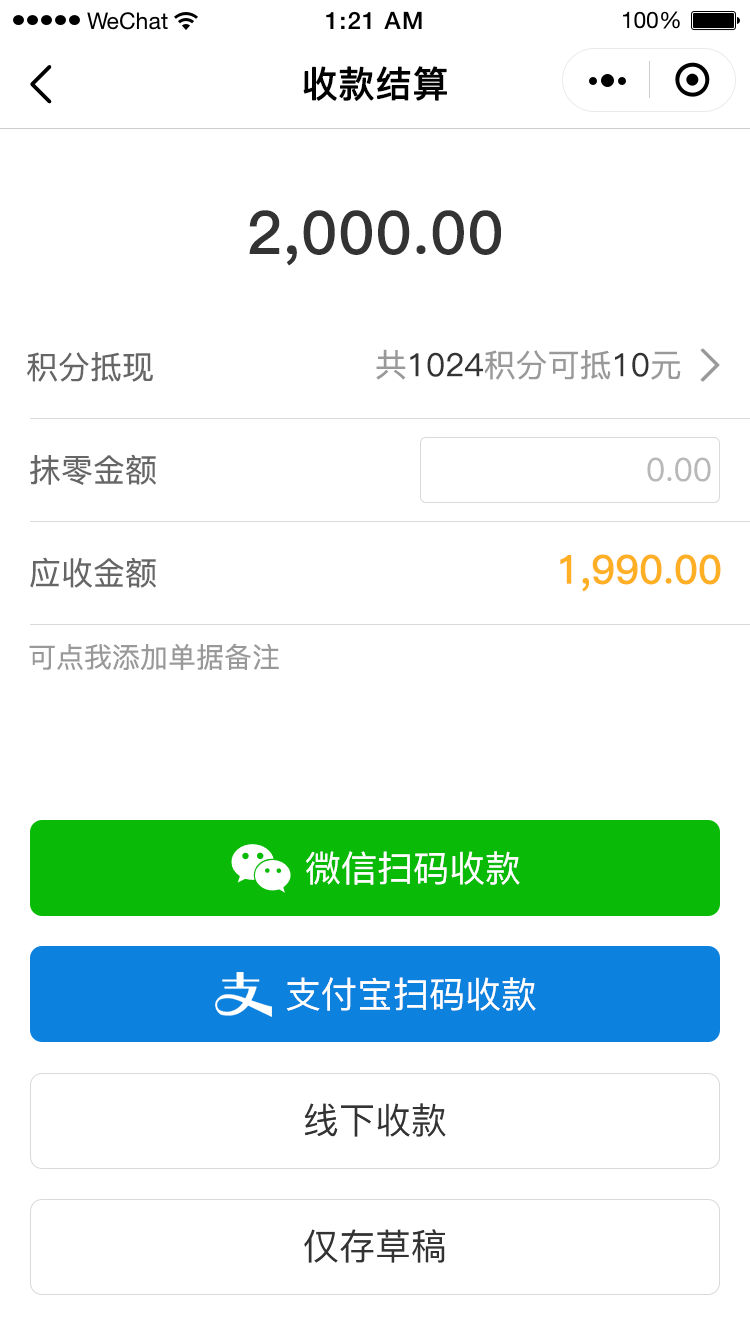
<style>
.page{position:relative;width:750px;height:1334px;background:#ffffff}
.page>*{position:absolute;margin:0}
.t1{font:36px "PingFang-SC-Medium";color:#000000;font-weight:bold}
.t2{font:60px "PingFang-SC-Bold";letter-spacing:0.02em;color:#333333}
.t3{font:32px "PingFang-SC-Medium";color:#666666}
.t4{font:32px "PingFang-SC-Medium";color:#333333}
.t5{font:32px "PingFang-SC-Medium";color:#999999}
.t6{font:32px "PingFang-SC-Medium";color:#b8b8b8}
.t7{font:40px "PingFang-SC-Bold";color:#ffaf23}
.t8{font:28px "PingFang-SC-Medium";color:#999999}
.t9{font:36px "PingFang-SC-Medium";color:#ffffff}
.t10{font:36px "PingFang-SC-Medium";color:#333333}
</style>
<div class="page">
<p class="t1" style="left:303px;top:66px;width:144px;height:35px">收款结算</p>
<p class="t2" style="left:249px;top:210px;width:252px;height:56px">2,000.00</p>
<p class="t3" style="left:27px;top:352px;width:126px;height:30px">积分抵现</p>
<p class="t4" style="left:376px;top:349px;width:305px;height:31px"><span class="t5">共</span>1024<span class="t5">积分可抵</span>10<span class="t5">元</span></p>
<p class="t3" style="left:30px;top:454px;width:126px;height:31px">抹零金额</p>
<p class="t6" style="left:647px;top:457px;width:64px;height:25px">0.00</p>
<p class="t3" style="left:30px;top:557px;width:126px;height:31px">应收金额</p>
<p class="t7" style="left:560px;top:554px;width:161px;height:38px">1,990.00</p>
<p class="t8" style="left:29px;top:643px;width:250px;height:27px">可点我添加单据备注</p>
<p class="t9" style="left:306px;top:851px;width:214px;height:34px">微信扫码收款</p>
<p class="t9" style="left:286px;top:977px;width:250px;height:34px">支付宝扫码收款</p>
<p class="t10" style="left:304px;top:1103px;width:142px;height:34px">线下收款</p>
<p class="t10" style="left:304px;top:1229px;width:141px;height:34px">仅存草稿</p>
</div>
